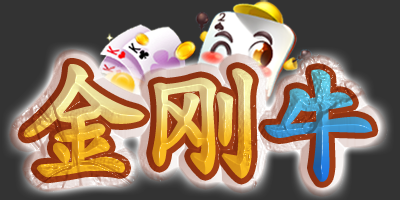
<style>
.page{position:relative;width:400px;height:200px;background:#333333}
.page>*{position:absolute;margin:0}
.t1{font:125px "AaBoruokaishuBldjf";letter-spacing:-0.06em;font-weight:bold}
</style>
<div class="page">
<p class="t1" style="left:23px;top:64px;width:230px;height:115px">金刚</p>
<p class="t1" style="left:264px;top:69px;width:109px;height:113px">牛</p>
</div>
